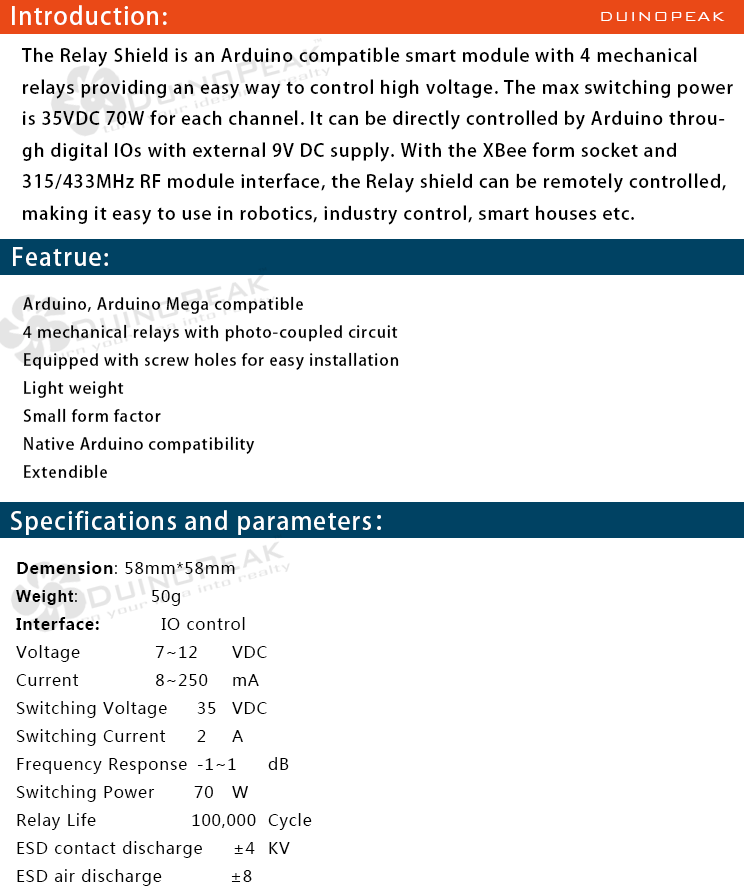
<style>
.page{position:relative;width:744px;height:894px;background:#ffffff}
.page>*{position:absolute;margin:0}
.t1{font:24px "AdobeHeitiStd-Regular";letter-spacing:0.05em;color:#ffffff}
.t2{font:18px "BankGothicBT-Light";letter-spacing:0.05em;color:#ffffff}
.t3{font:18px "AdobeHeitiStd-Regular";letter-spacing:0.05em;color:#000000}
.t4{font:16px "AdobeHeitiStd-Regular";letter-spacing:0.05em;color:#000000}
.t5{font:16px "MicrosoftYaHei";letter-spacing:0.05em;color:#000000}
.t6{font:16px "MicrosoftYaHei-Bold";letter-spacing:0.05em;color:#000000}
.t7{font:16px "Arial-BoldMT";letter-spacing:0.05em;color:#000000}
</style>
<div class="page">
<p class="t1" style="left:12px;top:5px;width:155px;height:20px">Introduction:</p>
<p class="t2" style="left:601px;top:12px;width:124px;height:9px">DUINOPEAK</p>
<p class="t3" style="left:21px;top:47px;width:712px;height:178px">The Relay Shield is an Arduino compatible smart module with 4 mechanical <br>relays providing an easy way to control high voltage. The max switching power <br>is 35VDC 70W for each channel. It can be directly controlled by Arduino throu-<br>gh digital IOs with external 9V DC supply. With the XBee form socket and <br>315/433MHz RF module interface, the Relay shield can be remotely controlled, <br>making it easy to use in robotics, industry control, smart houses etc.</p>
<p class="t1" style="left:13px;top:247px;width:95px;height:19px">Featrue:</p>
<p class="t4" style="left:23px;top:296px;width:376px;height:182px">Arduino, Arduino Mega compatible<br>4 mechanical relays with photo-coupled circuit<br>Equipped with screw holes for easy installation<br>Light weight<br>Small form factor<br>Native Arduino compatibility<br>Extendible</p>
<p class="t1" style="left:11px;top:510px;width:370px;height:25px">Specifications and parameters：</p>
<p class="t5" style="left:16px;top:561px;width:296px;height:325px"><span class="t6">Demension</span>: 58mm*58mm<br><span class="t7">Weight</span>:             50g<br><span class="t6">Interface:           </span>IO control<br>Voltage             7~12 VDC<br>Current             8~250 mA<br>Switching Voltage 35 VDC<br>Switching Current 2 A<br>Frequency Response -1~1 dB<br>Switching Power       70 W<br>Relay Life             100,000 Cycle<br>ESD contact discharge ±4 KV<br>ESD air discharge       ±8</p>
</div>
